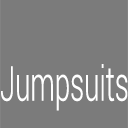
<style>
.page{position:relative;width:128px;height:128px;background:#7b7b7b}
.page>*{position:absolute;margin:0}
.t1{font:48px "Roboto-Light";color:#ffffff;scale:0.57 1}
</style>
<div class="page">
<p class="t1" style="left:1px;top:64px;width:127px;height:47px">Jumpsuits</p>
</div>
